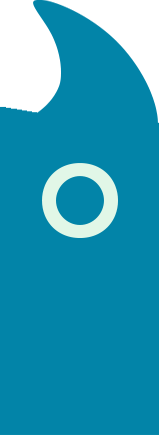
<style>
.page{position:relative;width:159px;height:435px;background:#0284a8}
.page>*{position:absolute;margin:0}
.t1{font:100px "FONTSPRINGDEMO-GeometosNeueBoldRegular";color:#e1f7e7}
</style>
<div class="page">
<p class="t1" style="left:42px;top:163px;width:76px;height:75px">O</p>
</div>
